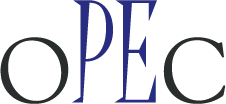
<style>
.page{position:relative;width:226px;height:104px;background:#ffffff}
.page>*{position:absolute;margin:0}
.t1{font:137.5px "JuiceITC-Regular";color:#282d81}
.t2{font:95.8px "GoudyOldStyleT-Regular";color:#2a2d2d}
</style>
<div class="page">
<p class="t1" style="left:0px;top:0px;width:226px;height:104px"><span class="t2">O</span>PE<span class="t2">C</span></p>
</div>
